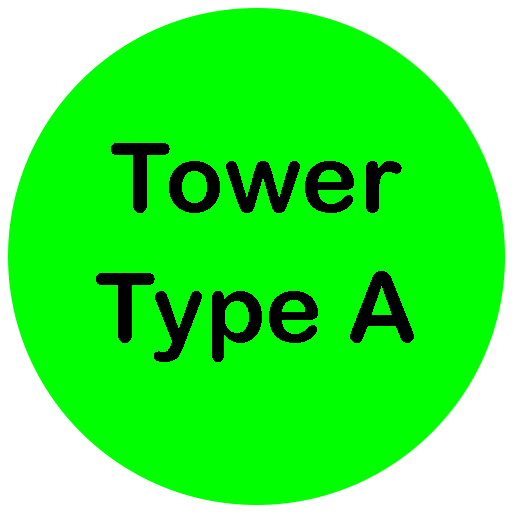
<style>
.page{position:relative;width:512px;height:512px;background:#00ff00}
.page>*{position:absolute;margin:0}
.t1{font:97.2px/65.1px "ArialRoundedMTBold";color:#000000}
</style>
<div class="page">
<p class="t1" style="left:96px;top:143px;width:318px;height:219px;text-align:center">Tower<br><br>Type A</p>
</div>
